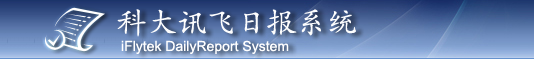
<style>
.page{position:relative;width:534px;height:59px}
.page>*{position:absolute;margin:0}
.t1{font:30px "STKaiti";color:#ffffff}
.t2{font:14px "ArialMT";color:#ffffff}
</style>
<div class="page">
<p class="t1" style="left:117px;top:9px;width:239px;height:28px">科大讯飞日报系统</p>
<p class="t2" style="left:121px;top:40px;width:168px;height:14px">iFlytek DailyReport System</p>
</div>
